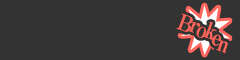
<style>
.page{position:relative;width:240px;height:60px;background:#333333}
.page>*{position:absolute;margin:0}
.t1{font:22px "RyuminPro-ExBold";letter-spacing:-0.12em;color:#ff655b;scale:0.9 1}
</style>
<div class="page">
<p class="t1" style="left:176px;top:13px;width:52px;height:41px;rotate:20deg">Broken</p>
</div>
